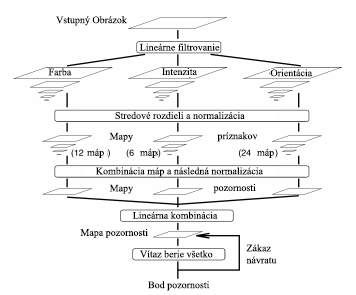
<style>
.page{position:relative;width:356px;height:295px;background:#fefefe}
.page>*{position:absolute;margin:0}
.t1{font:10px "TimesNewRomanPSMT";color:#000000}
</style>
<div class="page">
<p class="t1" style="left:56px;top:16px;width:71px;height:10px">Vstupný Obrázok</p>
<p class="t1" style="left:139px;top:43px;width:81px;height:8px">Lineárne filtrovanie</p>
<p class="t1" style="left:48px;top:68px;width:24px;height:8px">Farba</p>
<p class="t1" style="left:162px;top:67px;width:35px;height:9px">Intenzita</p>
<p class="t1" style="left:270px;top:69px;width:43px;height:8px">Orientácia</p>
<p class="t1" style="left:115px;top:111px;width:130px;height:8px">Stredové rozdieli a normalizácia</p>
<p class="t1" style="left:109px;top:132px;width:24px;height:10px">Mapy</p>
<p class="t1" style="left:217px;top:132px;width:41px;height:10px">príznakov</p>
<p class="t1" style="left:87px;top:148px;width:17px;height:10px">máp</p>
<p class="t1" style="left:140px;top:148px;width:17px;height:10px">máp</p>
<p class="t1" style="left:257px;top:148px;width:17px;height:10px">máp</p>
<p class="t1" style="left:96px;top:167px;width:167px;height:10px">Kombinácia máp a následná normalizácia</p>
<p class="t1" style="left:109px;top:184px;width:25px;height:10px">Mapy</p>
<p class="t1" style="left:213px;top:183px;width:43px;height:11px">pozornosti</p>
<p class="t1" style="left:132px;top:211px;width:86px;height:8px">Lineárna kombinácia</p>
<p class="t1" style="left:80px;top:228px;width:68px;height:10px">Mapa pozornosti</p>
<p class="t1" style="left:246px;top:244px;width:31px;height:20px">Zákaz <br>návratu</p>
<p class="t1" style="left:140px;top:250px;width:73px;height:8px">Vítaz berie všetko</p>
<p class="t1" style="left:148px;top:281px;width:62px;height:10px">Bod pozornosti</p>
</div>
